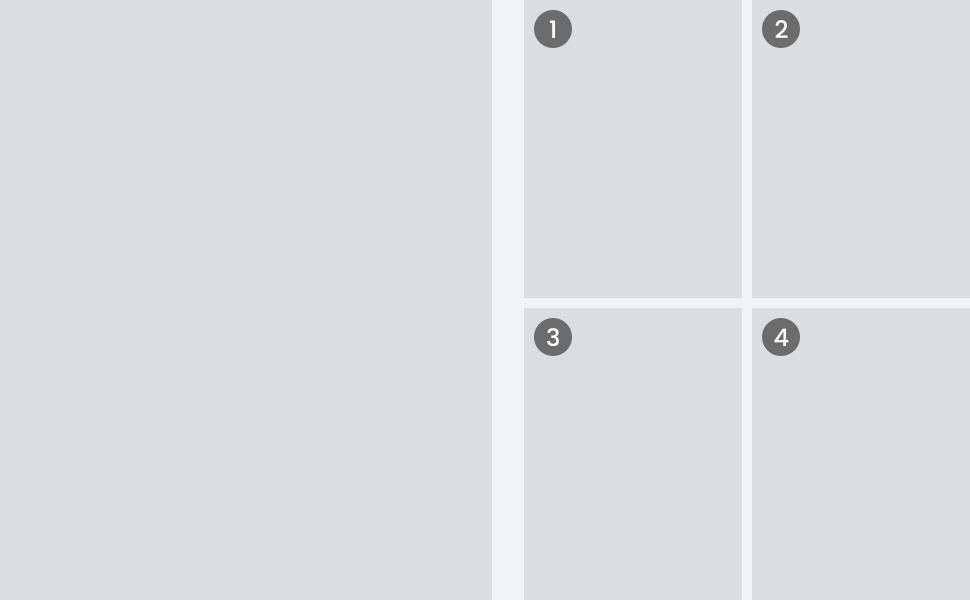
<style>
.page{position:relative;width:970px;height:600px;background:#dcdddf}
.page>*{position:absolute;margin:0}
.t1{font:24px "Poppins-Medium";color:#ffffff}
</style>
<div class="page">
<p class="t1" style="left:550px;top:20px;width:5px;height:18px">1</p>
<p class="t1" style="left:775px;top:20px;width:13px;height:18px">2</p>
<p class="t1" style="left:547px;top:328px;width:12px;height:18px">3</p>
<p class="t1" style="left:774px;top:328px;width:15px;height:18px">4</p>
</div>
